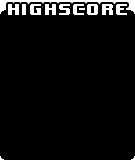
<style>
.page{position:relative;width:135px;height:160px;background:#000000}
.page>*{position:absolute;margin:0}
.t1{font:13.7px "8BITWONDERNominal";letter-spacing:0.1em;color:#ffffff}
</style>
<div class="page">
<p class="t1" style="left:8px;top:4px;width:119px;height:11px">HIGHSCORE</p>
</div>
